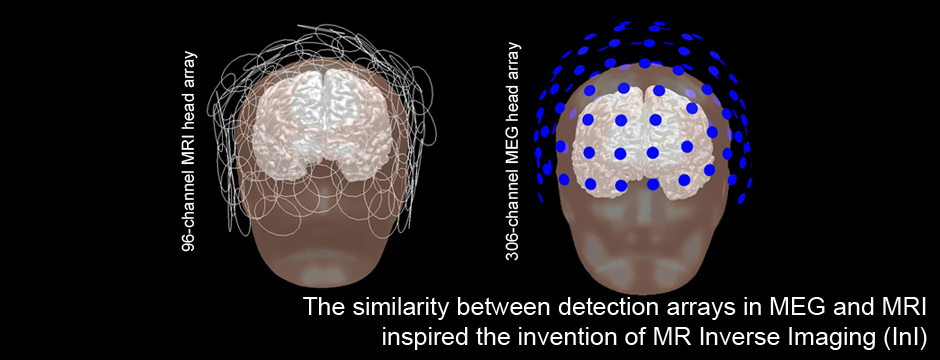
<style>
.page{position:relative;width:940px;height:360px;background:#000000}
.page>*{position:absolute;margin:0}
.t1{font:16.7px "ArialMT";color:#ffffff}
.t2{font:25px "ArialMT";color:#fdfcfc}
</style>
<div class="page">
<p class="t1" style="left:181px;top:51px;width:17px;height:201px;rotate:-90deg">96-channel MRI head array</p>
<p class="t1" style="left:505px;top:42px;width:17px;height:219px;rotate:-90deg">306-channel MEG head array</p>
<p class="t2" style="left:303px;top:297px;width:624px;height:53px;text-align:right">The similarity between detection arrays in MEG and MRI<br>inspired the invention of MR Inverse Imaging (InI)</p>
</div>
